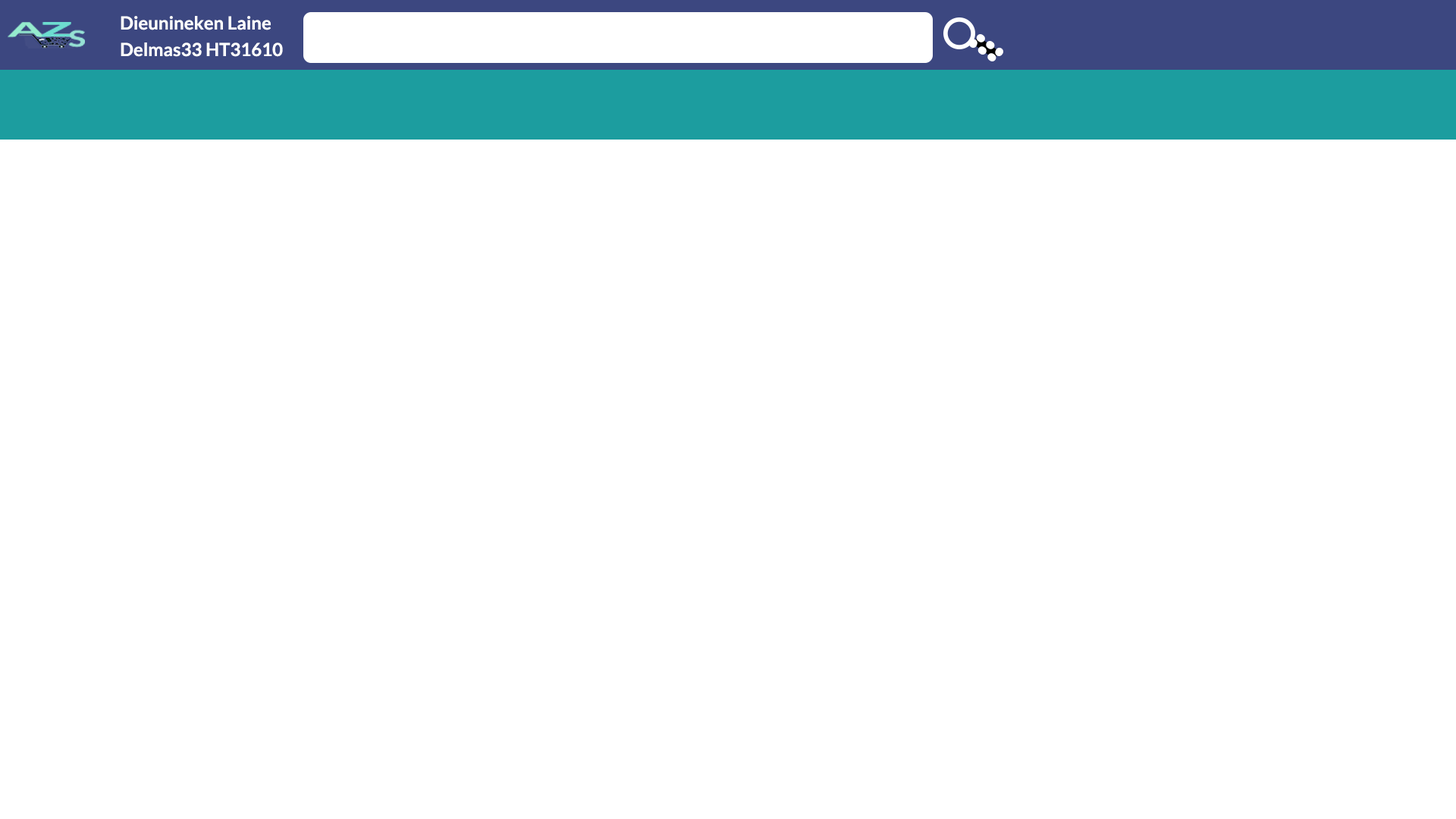
<style>
.page{position:relative;width:1456px;height:819px;background:#ffffff}
.page>*{position:absolute;margin:0}
.t1{font:18.2px "Lato-Bold";color:#ffffff}
</style>
<div class="page">
<p class="t1" style="left:121px;top:16px;width:150px;height:14px">Dieunineken Laine</p>
<p class="t1" style="left:121px;top:42px;width:162px;height:15px">Delmas33 HT31610</p>
</div>
